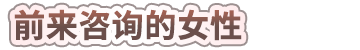
<style>
.page{position:relative;width:360px;height:50px;background:#ffffff}
.page>*{position:absolute;margin:0}
.t1{font:32px "SourceHanSansSC-Bold";font-weight:bold}
</style>
<div class="page">
<p class="t1" style="left:14px;top:9px;width:228px;height:32px">前来咨询的女性</p>
</div>
